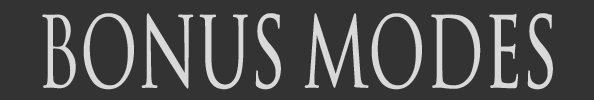
<style>
.page{position:relative;width:594px;height:100px;background:#333333}
.page>*{position:absolute;margin:0}
.t1{font:95.5px "SpaceandAstronomy";color:#d9d9d9;scale:0.66 1}
</style>
<div class="page">
<p class="t1" style="left:42px;top:13px;width:511px;height:77px">Bonus Modes</p>
</div>
